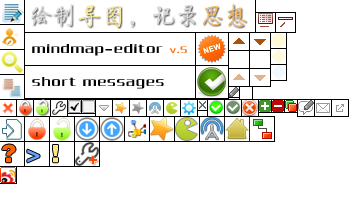
<style>
.page{position:relative;width:350px;height:200px;background:#ffffff}
.page>*{position:absolute;margin:0}
.t1{font:24px "FZQTJW--GB1-0";letter-spacing:0.024em;color:#dadada}
.t2{font:24px "FZQTJW--GB1-0";letter-spacing:0.024em;color:#fbeb96}
.t3{font:24px "FZQTJW--GB1-0";letter-spacing:0.024em;color:#f8b861}
.t4{font:14px "FZCQJW--GB1-0";letter-spacing:0.1em;color:#000000}
.t5{font:10px "FZCQJW--GB1-0";letter-spacing:0.1em;color:#fb6b00}
.t6{font:24px "FZCCHJW--GB1-0";letter-spacing:0.1em;color:#ff6203}
.t7{font:24px "FZCCHJW--GB1-0";letter-spacing:0.1em;color:#63a1ff}
.t8{font:24px "FZCCHJW--GB1-0";letter-spacing:0.1em;color:#fbe881}
</style>
<div class="page">
<p class="t1" style="left:31px;top:3px;width:215px;height:25px">绘制<span class="t2">导图</span>，记录<span class="t3">思想</span></p>
<p class="t4" style="left:32px;top:44px;width:155px;height:12px">mindmap-editor <span class="t5">v.5</span></p>
<p class="t4" style="left:32px;top:77px;width:132px;height:12px">short messages</p>
<p class="t6" style="left:2px;top:144px;width:14px;height:19px">?</p>
<p class="t7" style="left:27px;top:149px;width:13px;height:14px">&gt;</p>
<p class="t8" style="left:53px;top:145px;width:5px;height:18px">!</p>
</div>
